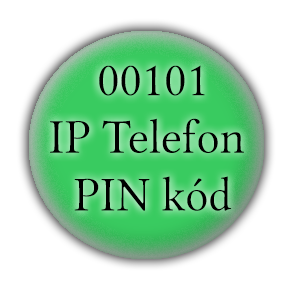
<style>
.page{position:relative;width:300px;height:300px;background:#ffffff}
.page>*{position:absolute;margin:0}
.t1{font:48px "LinuxLibertineDG";color:#000000}
</style>
<div class="page">
<p class="t1" style="left:50px;top:65px;width:194px;height:146px;text-align:center">00101<br>IP Telefon <br>PIN kód</p>
</div>
